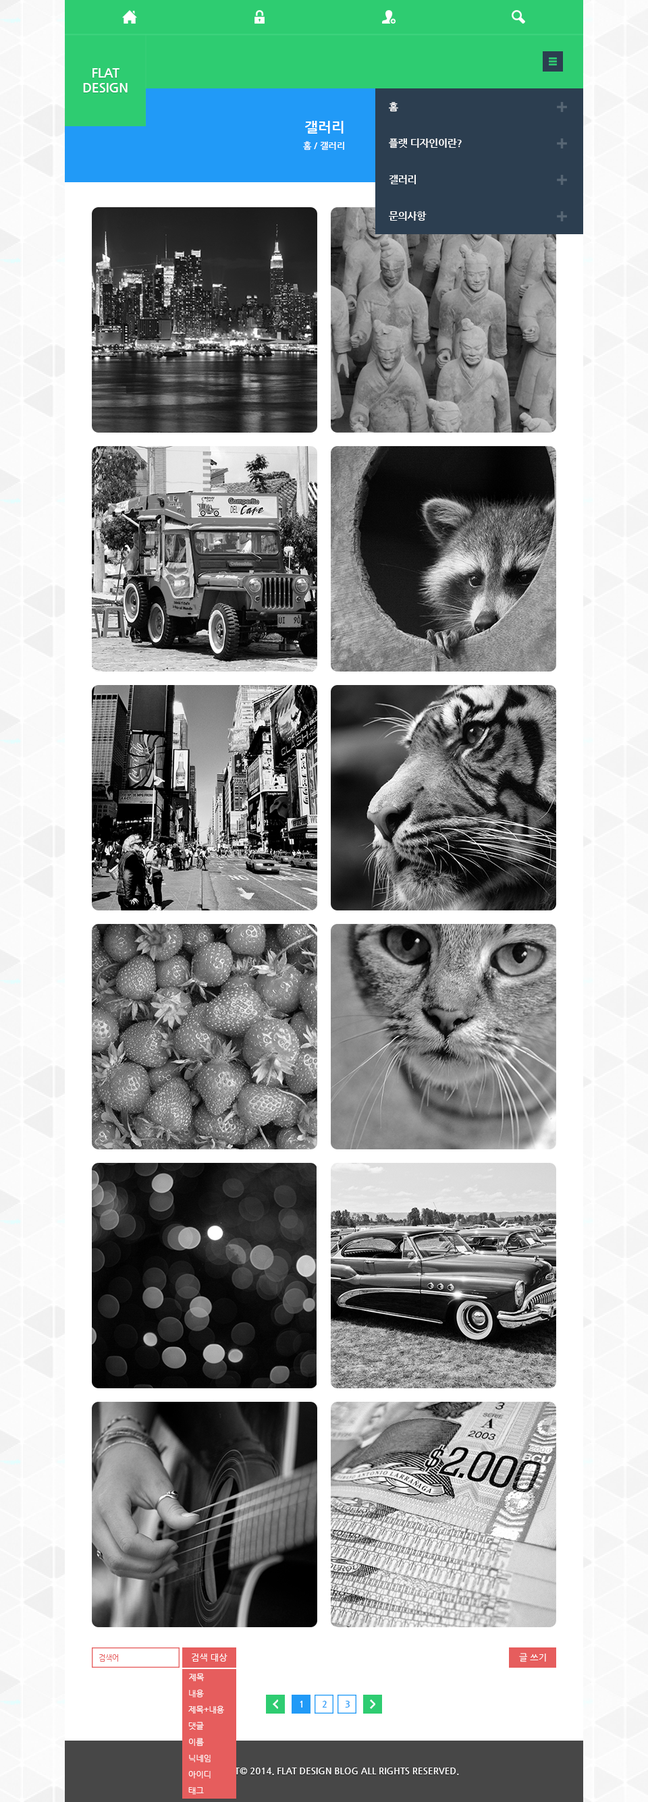
<style>
.page{position:relative;width:648px;height:1802px}
.page>*{position:absolute;margin:0}
.t1{font:12.6px "NanumGothicBold";color:#ffffff}
.t2{font:9.9px "NanumGothicBold";color:#ffffff}
.t3{font:14.4px "NanumGothicBold";color:#ffffff}
.t4{font:9px "NanumGothicBold";color:#ffffff}
.t5{font:7.2px "NanumGothic";color:#e65d5d}
.t6{font:9px "NanumGothic";color:#ffffff}
.t7{font:8.1px "NanumGothic";color:#fffefe}
.t8{font:9px "NanumGothicBold";color:#219af7}
</style>
<div class="page">
<p class="t1" style="left:83px;top:68px;width:45px;height:24px;text-align:center">FLAT<br>DESIGN</p>
<p class="t2" style="left:389px;top:102px;width:9px;height:10px">홈</p>
<p class="t3" style="left:305px;top:121px;width:39px;height:13px">갤러리</p>
<p class="t4" style="left:303px;top:141px;width:41px;height:10px">홈 / 갤러리</p>
<p class="t2" style="left:389px;top:138px;width:73px;height:11px">플랫 디자인이란?</p>
<p class="t2" style="left:389px;top:175px;width:27px;height:9px">갤러리</p>
<p class="t2" style="left:389px;top:211px;width:38px;height:10px">문의사항</p>
<p class="t5" style="left:99px;top:1654px;width:19px;height:8px">검색어</p>
<p class="t6" style="left:192px;top:1654px;width:35px;height:8px">검색 대상</p>
<p class="t6" style="left:519px;top:1653px;width:27px;height:10px">글 쓰기</p>
<p class="t7" style="left:189px;top:1673px;width:16px;height:8px">제목</p>
<p class="t7" style="left:189px;top:1690px;width:15px;height:8px">내용</p>
<p class="t7" style="left:188px;top:1706px;width:36px;height:8px">제목+내용</p>
<p class="t4" style="left:300px;top:1701px;width:2px;height:7px">1</p>
<p class="t8" style="left:322px;top:1701px;width:5px;height:7px">2</p>
<p class="t8" style="left:345px;top:1701px;width:5px;height:7px">3</p>
<p class="t7" style="left:188px;top:1722px;width:16px;height:8px">댓글</p>
<p class="t7" style="left:189px;top:1738px;width:15px;height:8px">이름</p>
<p class="t7" style="left:189px;top:1755px;width:22px;height:7px">닉네임</p>
<p class="t4" style="left:189px;top:1768px;width:270px;height:7px">COPYRIGHT© 2014. FLAT DESIGN BLOG ALL RIGHTS RESERVED.</p>
<p class="t7" style="left:188px;top:1771px;width:23px;height:8px">아이디</p>
<p class="t7" style="left:188px;top:1787px;width:16px;height:8px">태그</p>
</div>
